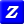
<style>
.page{position:relative;width:24px;height:24px;background:#0000ff}
.page>*{position:absolute;margin:0}
.t1{font:18px "BookmanOldStyle-BoldItalic";color:#ffffff}
</style>
<div class="page">
<p class="t1" style="left:5px;top:6px;width:14px;height:12px">Z</p>
</div>
